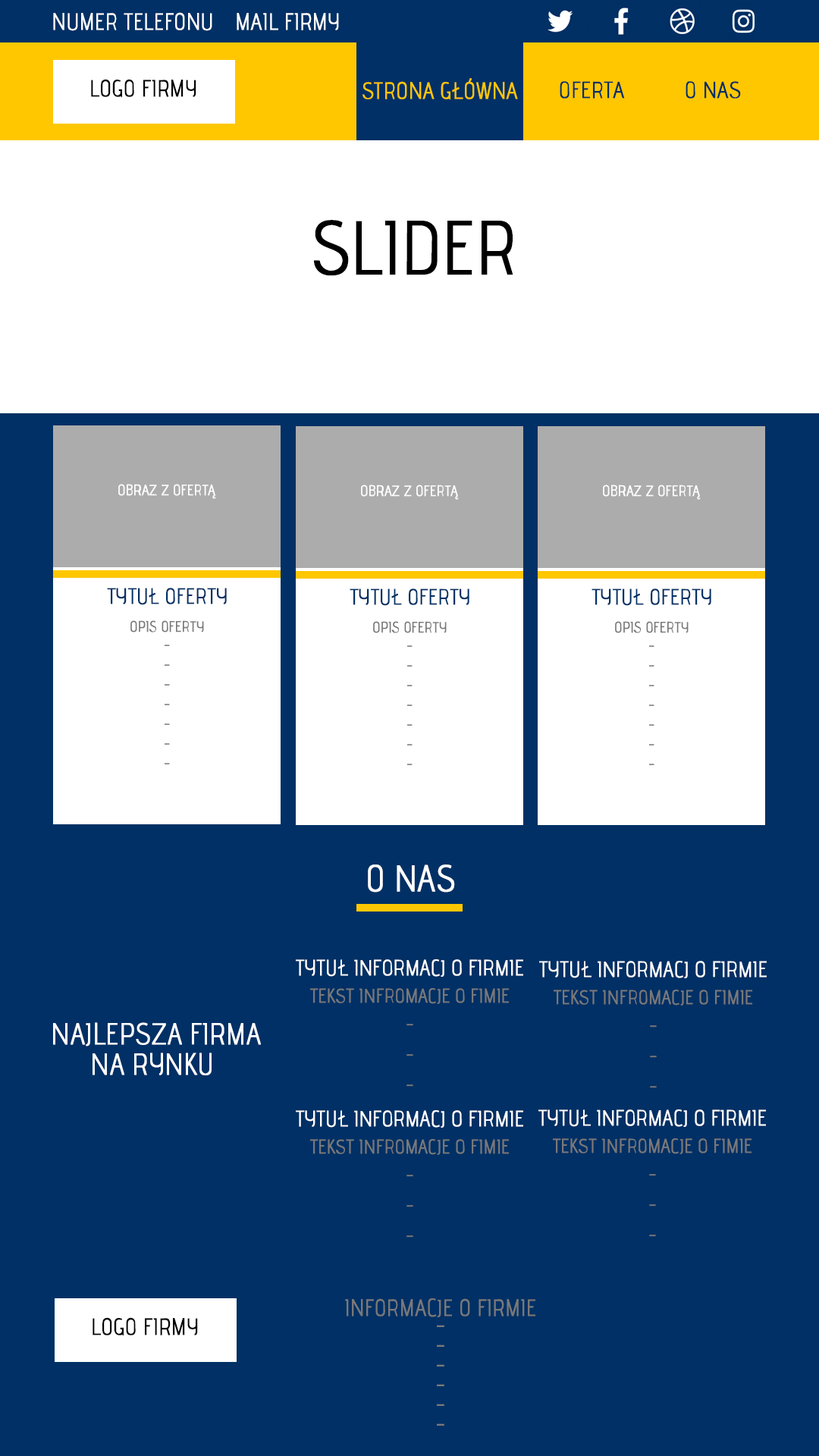
<style>
.page{position:relative;width:819px;height:1456px;background:#003065}
.page>*{position:absolute;margin:0}
.t1{font:23.5px "advent-Regular";color:#ffffff;text-transform:uppercase;font-weight:bold;scale:0.9 1}
.t2{font:23.5px "advent-Regular";color:#000000;text-transform:uppercase;font-weight:bold;scale:0.9 1}
.t3{font:23.5px "advent-Regular";color:#ffc700;text-transform:uppercase;font-weight:bold;scale:0.9 1}
.t4{font:23.1px "advent-Regular";color:#002f63;text-transform:uppercase;font-weight:bold;scale:0.91 1}
.t5{font:75.8px "advent-Regular";color:#000000;text-transform:uppercase;font-weight:bold;scale:0.9 1}
.t6{font:23.5px "advent-Regular";color:#002f63;text-transform:uppercase;font-weight:bold;scale:0.9 1}
.t7{font:15.2px "advent-Regular";color:#ffffff;text-transform:uppercase;font-weight:bold;scale:0.9 1}
.t8{font:22px "advent-Regular";color:#003065;text-transform:uppercase;font-weight:bold;scale:0.9 1}
.t9{font:15.2px/19.7px "advent-Regular";color:#797979;text-transform:uppercase;font-weight:bold;scale:0.9 1}
.t10{font:37.2px "advent-Regular";color:#ffffff;text-transform:uppercase;font-weight:bold;scale:0.9 1}
.t11{font:22px "advent-Regular";color:#ffffff;text-transform:uppercase;font-weight:bold;scale:0.9 1}
.t12{font:19.7px/30.3px "advent-Regular";color:#797979;text-transform:uppercase;font-weight:bold;scale:0.9 1}
.t13{font:30.3px/30.3px "advent-Regular";color:#ffffff;text-transform:uppercase;font-weight:bold;scale:0.9 1}
.t14{font:23.5px/19.7px "advent-Regular";color:#797979;text-transform:uppercase;font-weight:bold;scale:0.9 1}
</style>
<div class="page">
<p class="t1" style="left:53px;top:12px;width:159px;height:19px">NUMER TELEFONU</p>
<p class="t1" style="left:237px;top:13px;width:102px;height:17px">MAIL FIRMY</p>
<p class="t2" style="left:91px;top:79px;width:105px;height:19px">logo firmy</p>
<p class="t3" style="left:362px;top:78px;width:156px;height:22px">strona główna</p>
<p class="t4" style="left:560px;top:81px;width:65px;height:18px">oferta</p>
<p class="t4" style="left:686px;top:81px;width:55px;height:18px">o nas</p>
<p class="t5" style="left:314px;top:220px;width:199px;height:56px"><span class="t6"><br><br><br><br><br><br></span>slider</p>
<p class="t7" style="left:118px;top:484px;width:98px;height:15px">obraz z ofertą</p>
<p class="t8" style="left:107px;top:588px;width:120px;height:17px">tytuł oferty</p>
<p class="t9" style="left:130px;top:620px;width:74px;height:144px;text-align:center">opis oferty<br>-<br>-<br>-<br>-<br>-<br>-<br>-</p>
<p class="t10" style="left:368px;top:864px;width:87px;height:29px">O nas</p>
<p class="t11" style="left:296px;top:959px;width:227px;height:18px">tytuł informacj o firmie</p>
<p class="t11" style="left:539px;top:961px;width:228px;height:17px">tytuł informacj o firmie</p>
<p class="t12" style="left:309px;top:988px;width:201px;height:99px;text-align:center">tekst infromacje o fimie<br>-<br>-<br>-</p>
<p class="t12" style="left:553px;top:990px;width:200px;height:98px;text-align:center">tekst infromacje o fimie<br>-<br>-<br>-</p>
<p class="t13" style="left:53px;top:1022px;width:208px;height:53px;text-align:center">najlepsza firma<br>na rynku</p>
<p class="t11" style="left:538px;top:1109px;width:228px;height:18px">tytuł informacj o firmie</p>
<p class="t11" style="left:296px;top:1110px;width:227px;height:18px">tytuł informacj o firmie</p>
<p class="t12" style="left:309px;top:1139px;width:201px;height:99px;text-align:center">tekst infromacje o fimie<br>-<br>-<br>-</p>
<p class="t12" style="left:552px;top:1138px;width:200px;height:99px;text-align:center">tekst infromacje o fimie<br>-<br>-<br>-</p>
<p class="t14" style="left:345px;top:1298px;width:190px;height:128px;text-align:center">informacje o firmie<br>-<br>-<br>-<br>-<br>-<br>-</p>
<p class="t2" style="left:93px;top:1317px;width:105px;height:19px">logo firmy</p>
</div>
